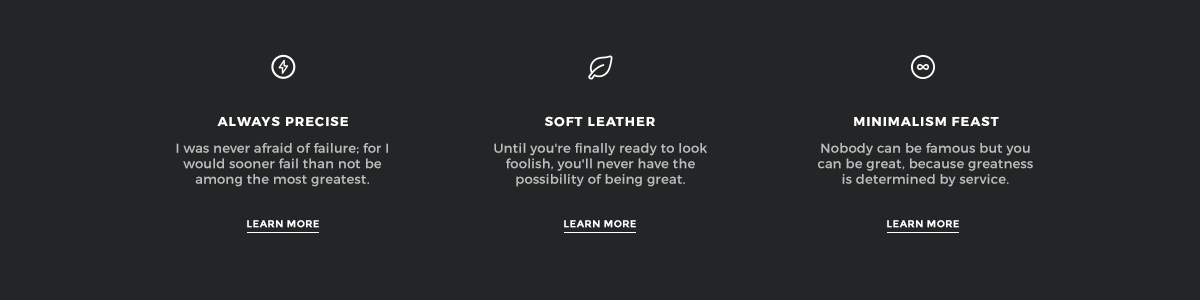
<style>
.page{position:relative;width:1200px;height:300px;background:#242526}
.page>*{position:absolute;margin:0}
.t1{font:13px "Montserrat-Bold";letter-spacing:0.08em;color:#ffffff;text-transform:uppercase}
.t2{font:13px "Montserrat-Regular";letter-spacing:0.025em;color:#bcbdbd}
.t3{font:10px "Montserrat-Bold";letter-spacing:0.04em;color:#ffffff;text-transform:uppercase}
</style>
<div class="page">
<p class="t1" style="left:217px;top:116px;width:131px;height:11px">always precise</p>
<p class="t1" style="left:545px;top:116px;width:110px;height:11px">soft leather</p>
<p class="t1" style="left:854px;top:116px;width:145px;height:10px">minimalism feast</p>
<p class="t2" style="left:176px;top:143px;width:212px;height:44px;text-align:center">I was never afraid of failure; for I would sooner fail than not be among the most greatest.</p>
<p class="t2" style="left:494px;top:143px;width:213px;height:44px;text-align:center">Until you're finally ready to look foolish, you'll never have the possibility of being great.</p>
<p class="t2" style="left:818px;top:143px;width:215px;height:44px;text-align:center">Nobody can be famous but you can be great, because greatness is determined by service.</p>
<p class="t3" style="left:247px;top:220px;width:72px;height:8px">Learn more</p>
<p class="t3" style="left:564px;top:220px;width:72px;height:8px">Learn more</p>
<p class="t3" style="left:887px;top:220px;width:72px;height:8px">Learn more</p>
</div>
